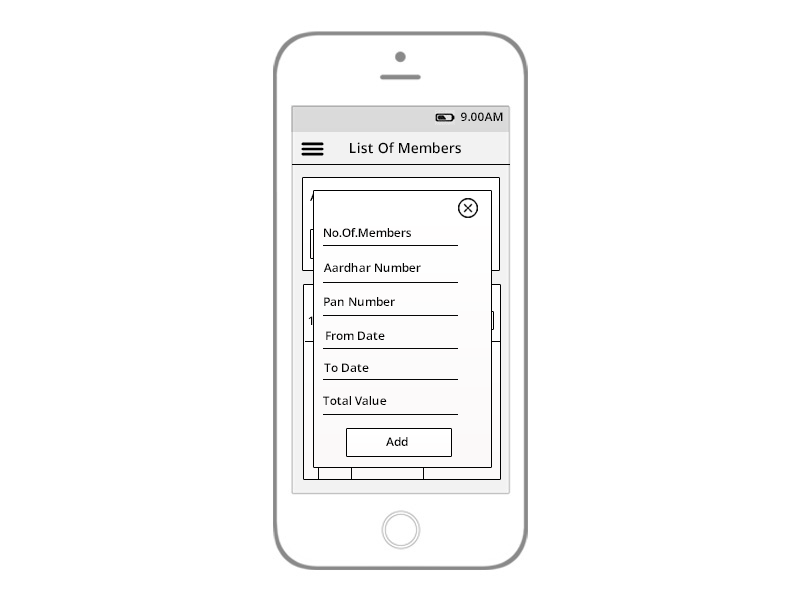
<style>
.page{position:relative;width:800px;height:600px;background:#ffffff}
.page>*{position:absolute;margin:0}
.t1{font:12px "OpenSans-Semibold";color:#030303}
.t2{font:14px "OpenSans-Semibold";color:#030303}
</style>
<div class="page">
<p class="t1" style="left:461px;top:112px;width:42px;height:9px">9.00AM</p>
<p class="t2" style="left:350px;top:142px;width:111px;height:12px">List Of Members</p>
<p class="t1" style="left:324px;top:228px;width:87px;height:9px">No.Of.Members</p>
<p class="t1" style="left:323px;top:263px;width:98px;height:9px">Aardhar Number</p>
<p class="t1" style="left:324px;top:297px;width:71px;height:9px">Pan Number</p>
<p class="t1" style="left:308px;top:316px;width:5px;height:9px">1</p>
<p class="t1" style="left:326px;top:331px;width:59px;height:9px">From Date</p>
<p class="t1" style="left:324px;top:363px;width:45px;height:9px">To Date</p>
<p class="t1" style="left:323px;top:396px;width:64px;height:9px">Total Value</p>
<p class="t1" style="left:386px;top:437px;width:22px;height:9px">Add</p>
</div>
